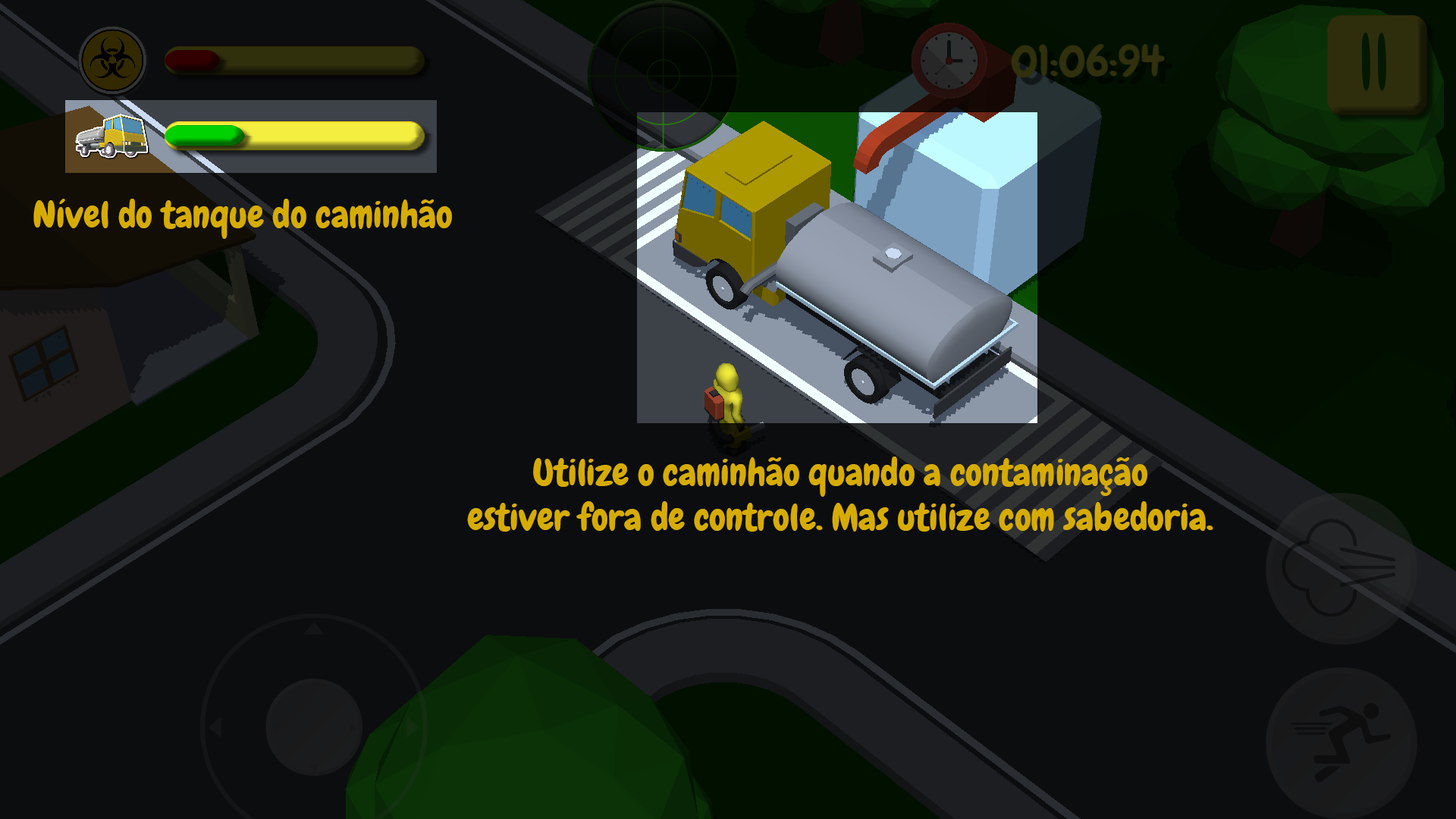
<style>
.page{position:relative;width:1456px;height:819px;background:#0c0d0f}
.page>*{position:absolute;margin:0}
.t1{font:37.1px "Chewy-Regular";color:#d6ac02}
</style>
<div class="page">
<p class="t1" style="left:33px;top:199px;width:419px;height:40px">Nível do tanque do caminhão</p>
<p class="t1" style="left:467px;top:457px;width:746px;height:75px;text-align:center">Utilize o caminhão quando a contaminação<br>estiver fora de controle. Mas utilize com sabedoria.</p>
</div>
